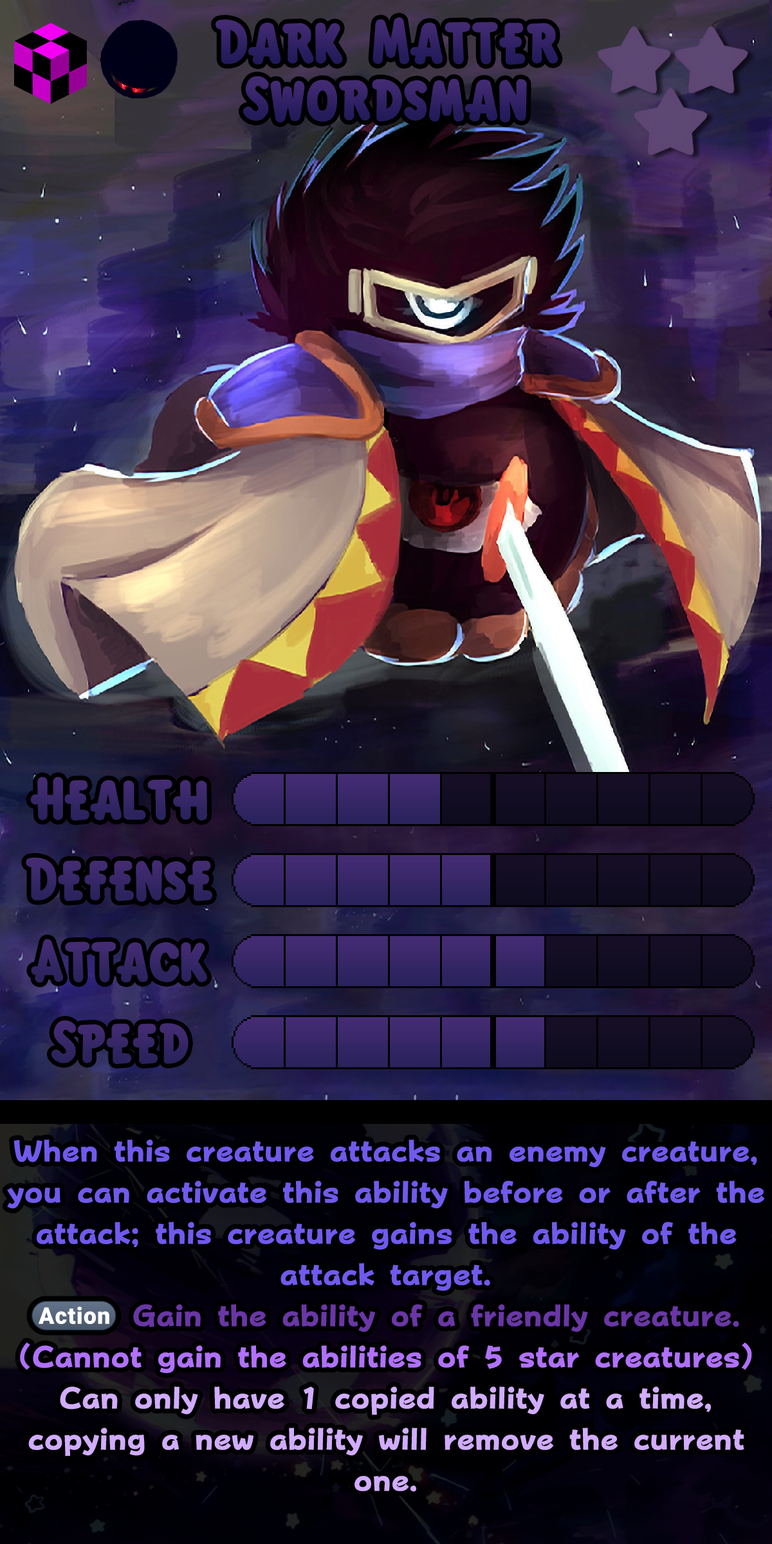
<style>
.page{position:relative;width:772px;height:1544px}
.page>*{position:absolute;margin:0}
.t1{font:96.5px "KirbyClassic";color:#312265}
.t2{font:92.7px "KirbyClassic";color:#362767}
.t3{font:92.7px "KirbyClassic";color:#372768}
.t4{font:30.2px/41.2px "FOTPopHappinessStrp-ExtraBold";color:#705aee}
.t5{font:30.2px/41.2px "stoogedings-Regular";color:#6937a6}
.t6{font:30.2px/41.2px "FOTPopHappinessStrp-ExtraBold";color:#6937a6}
.t7{font:30.2px/41.2px "FOTPopHappinessStrp-ExtraBold";color:#b071fe}
.t8{font:30.2px/41.2px "FOTPopHappinessStrp-ExtraBold";color:#d1acff}
</style>
<div class="page">
<p class="t1" style="left:216px;top:17px;width:343px;height:48px">Dark Matter</p>
<p class="t1" style="left:243px;top:76px;width:284px;height:47px">Swordsman</p>
<p class="t2" style="left:30px;top:777px;width:178px;height:44px">Health</p>
<p class="t3" style="left:26px;top:858px;width:186px;height:44px">Defense</p>
<p class="t2" style="left:31px;top:939px;width:176px;height:44px">Attack</p>
<p class="t3" style="left:51px;top:1021px;width:138px;height:43px">Speed</p>
<p class="t4" style="left:7px;top:1140px;width:758px;height:352px;text-align:center">When this creature attacks an enemy creature, you can activate this ability before or after the attack; this creature gains the ability of the attack target.<br><span class="t5">(Action)</span><span class="t6"> Gain the ability of a friendly creature.<br></span><span class="t7">(Cannot gain the abilities of 5 star creatures)<br></span><span class="t8">Can only have 1 copied ability at a time, copying a new ability will remove the current one.</span></p>
</div>
